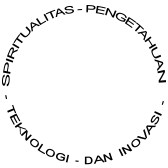
<style>
.page{position:relative;width:168px;height:168px;background:#ffffff}
.page>*{position:absolute;margin:0}
.t1{font:10px "ArialMT";letter-spacing:-0.06em;color:#000000;text-transform:uppercase}
.t2{font:9.7px/0px "ArialMT";letter-spacing:-0.04em;color:#000000;text-transform:uppercase;scale:1.07 1}
</style>
<div class="page">
<p class="t1" style="left:2px;top:5px;width:165px;height:82px">Spiritualitas - Pengetahuan</p>
<p class="t2" style="left:5px;top:95px;width:159px;height:70px">- TEKNOLOGI  - Dan  Inovasi  -</p>
</div>
